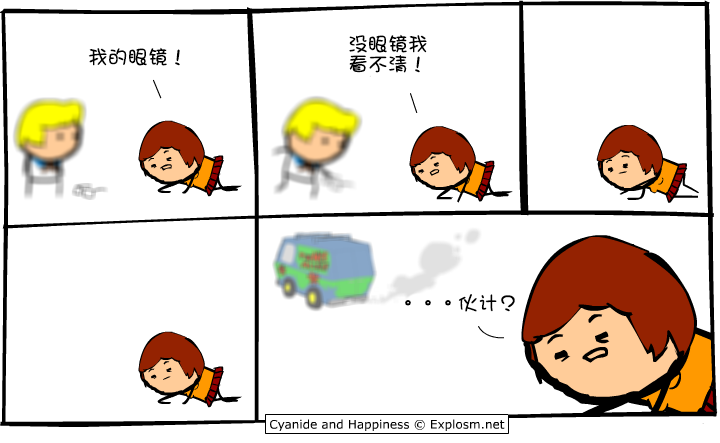
<style>
.page{position:relative;width:720px;height:443px;background:#ffffff}
.page>*{position:absolute;margin:0}
.t1{font:20px/20px "DFGirl";color:#000000}
.t2{font:20px "DFGirl";color:#000000}
</style>
<div class="page">
<p class="t1" style="left:349px;top:34px;width:78px;height:39px">没眼镜我<br>看不清！</p>
<p class="t2" style="left:88px;top:47px;width:92px;height:19px">我的眼镜！</p>
<p class="t2" style="left:405px;top:294px;width:110px;height:18px">。。。伙计？</p>
</div>
